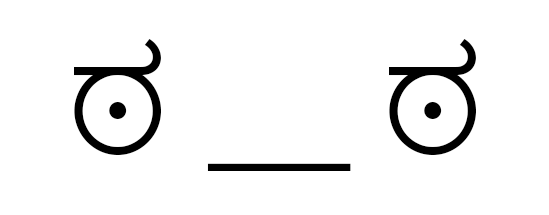
<style>
.page{position:relative;width:549px;height:215px;background:#ffffff}
.page>*{position:absolute;margin:0}
.t1{font:142.8px "MyriadPro-Regular";color:#000000}
.t2{font:142.8px "NirmalaUI-Semilight";color:#000000}
</style>
<div class="page">
<p class="t1" style="left:74px;top:39px;width:402px;height:132px"><span class="t2">ಠ </span>__ <span class="t2">ಠ</span></p>
</div>
